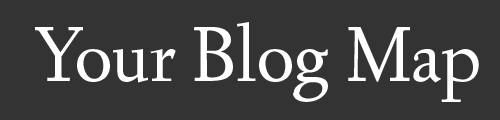
<style>
.page{position:relative;width:500px;height:120px;background:#333333}
.page>*{position:absolute;margin:0}
.t1{font:80.9px "LindenHill";color:#ffffff}
</style>
<div class="page">
<p class="t1" style="left:35px;top:22px;width:444px;height:80px">Your Blog Map</p>
</div>
